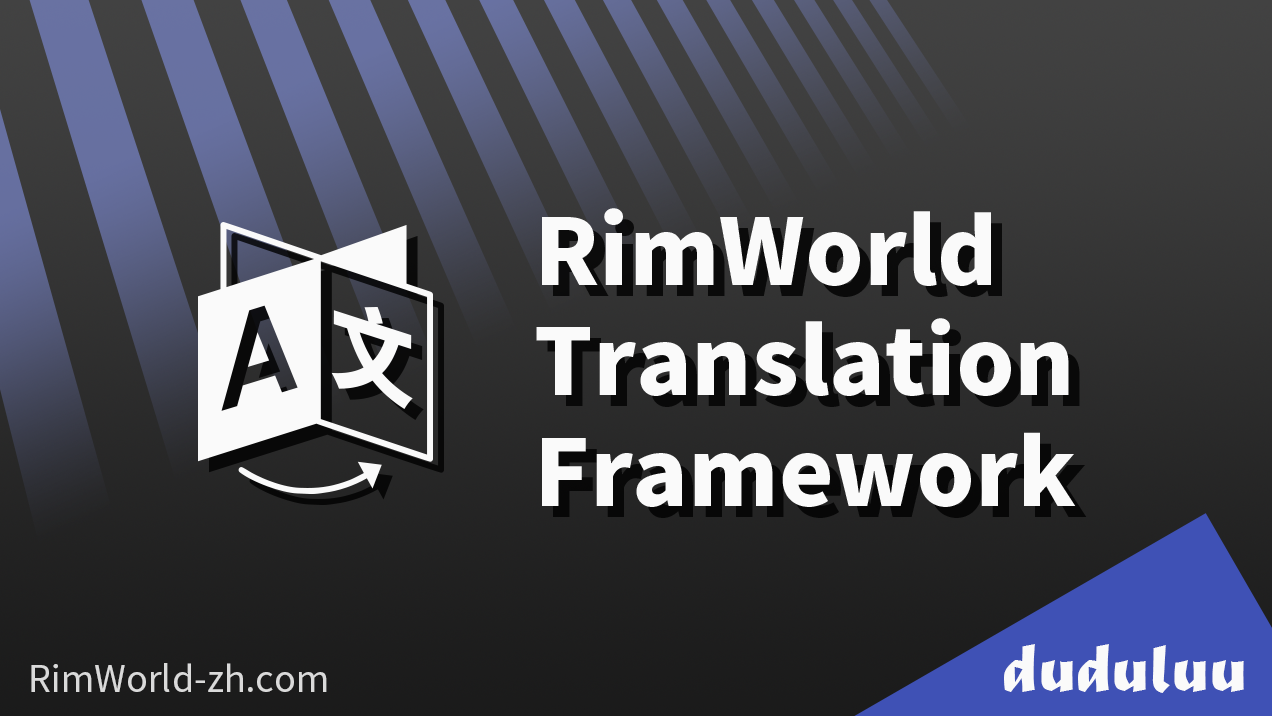
<style>
.page{position:relative;width:1272px;height:716px}
.page>*{position:absolute;margin:0}
.t1{font:92px "NotoSansSC-Black";color:#fafafa}
.t2{font:72px "MaturaMTScriptCapitals";color:#fafafa}
.t3{font:36px "NotoSansSC-Regular";color:#dadada}
</style>
<div class="page">
<p class="t1" style="left:536px;top:208px;width:540px;height:299px">RimWorld<br>Translation<br>Framework</p>
<p class="t2" style="left:1004px;top:644px;width:240px;height:49px">duduluu</p>
<p class="t3" style="left:31px;top:663px;width:296px;height:29px">RimWorld-zh.com</p>
</div>
